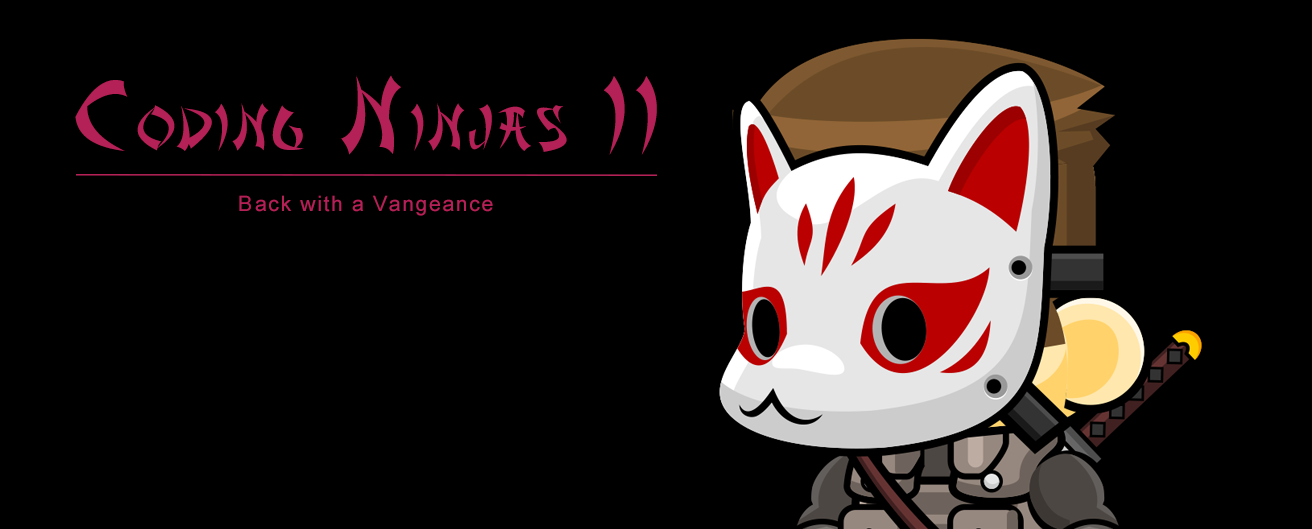
<style>
.page{position:relative;width:1312px;height:529px;background:#000000}
.page>*{position:absolute;margin:0}
.t1{font:58px "AsianDelight";letter-spacing:0.1em;color:#b42157;scale:0.93 1}
.t2{font:96.7px "AsianDelight";letter-spacing:0.1em;color:#b42157;scale:0.93 1}
.t3{font:21.3px "ArialMT";letter-spacing:0.075em;color:#b42157}
</style>
<div class="page">
<p class="t1" style="left:75px;top:75px;width:582px;height:80px"><span class="t2">C</span>ODING<span class="t2"> N</span>INJAS<span class="t2"> II</span></p>
<p class="t3" style="left:239px;top:195px;width:254px;height:21px">Back with a Vangeance</p>
</div>
